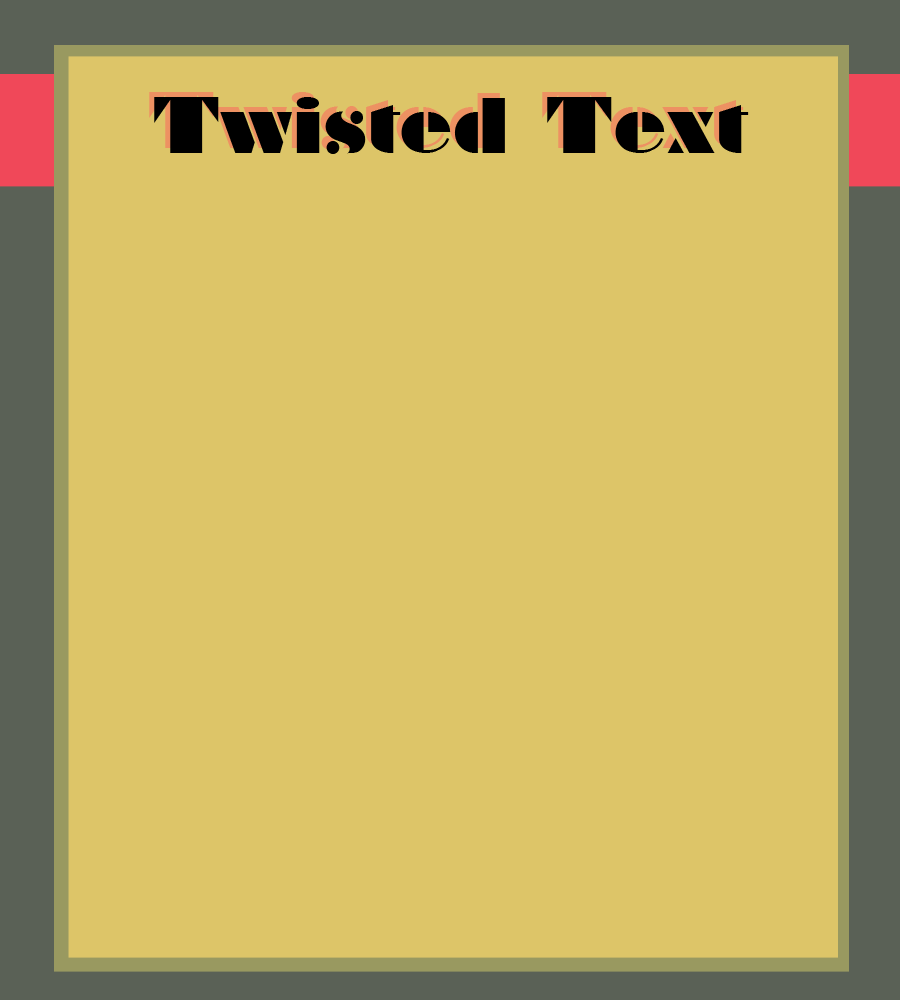
<style>
.page{position:relative;width:900px;height:1000px;background:#ddc568}
.page>*{position:absolute;margin:0}
.t1{font:72px "Braggadocio"}
.t2{font:72px "Braggadocio";color:#000000}
</style>
<div class="page">
<p class="t1" style="left:149px;top:92px;width:595px;height:57px">Twisted Text</p>
<p class="t2" style="left:154px;top:97px;width:595px;height:57px">Twisted Text</p>
</div>
